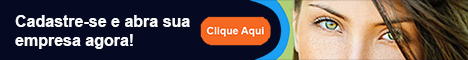
<style>
.page{position:relative;width:468px;height:60px;background:#050922}
.page>*{position:absolute;margin:0}
.t1{font:16px "Arial-BoldMT";color:#fafafb}
</style>
<div class="page">
<p class="t1" style="left:15px;top:15px;width:175px;height:34px">Cadastre-se e abra sua<br>empresa agora!</p>
</div>
